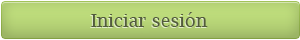
<style>
.page{position:relative;width:300px;height:40px}
.page>*{position:absolute;margin:0}
.t1{font:18px "LucidaBright";color:#525b3d}
</style>
<div class="page">
<p class="t1" style="left:91px;top:12px;width:117px;height:15px">Iniciar sesión</p>
</div>
